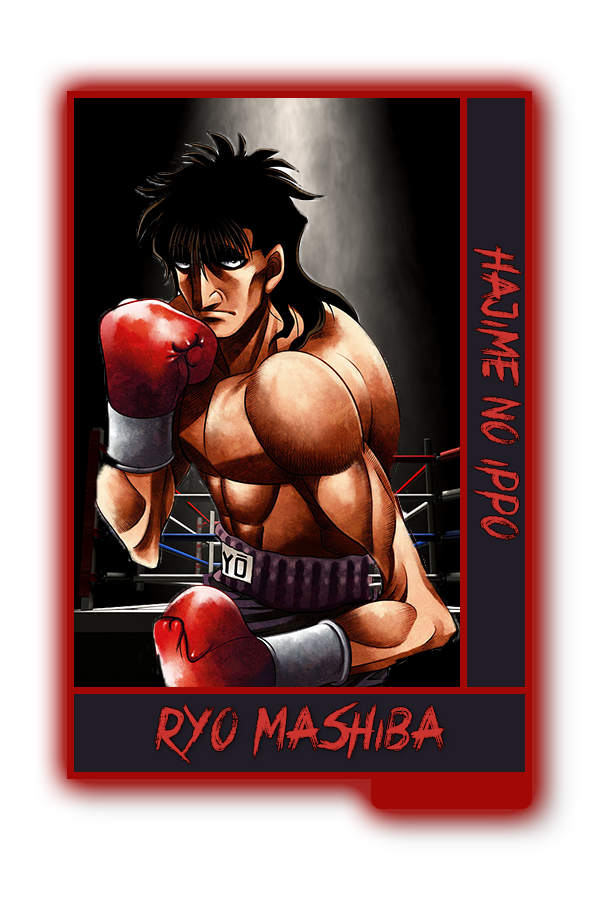
<style>
.page{position:relative;width:600px;height:900px;background:#ffffff}
.page>*{position:absolute;margin:0}
.t1{font:54.2px "CrimesTimesSix";color:#cb332f}
.t2{font:62.5px "CrimesTimesSix";color:#cb332f}
</style>
<div class="page">
<p class="t1" style="left:470px;top:245px;width:52px;height:295px;rotate:90deg">Hajime No Ippo</p>
<p class="t2" style="left:155px;top:702px;width:290px;height:62px">Ryo Mashiba</p>
</div>
